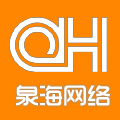
<style>
.page{position:relative;width:120px;height:120px;background:#ff8600}
.page>*{position:absolute;margin:0}
.t1{font:24px "TRENDS";color:#ffffff}
</style>
<div class="page">
<p class="t1" style="left:16px;top:85px;width:94px;height:21px">泉海网络</p>
</div>
